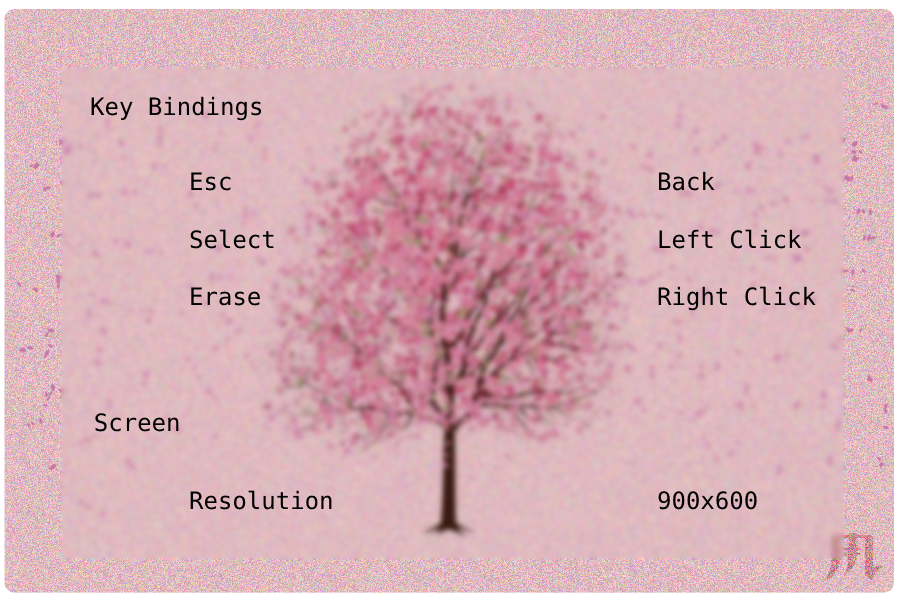
<style>
.page{position:relative;width:900px;height:600px}
.page>*{position:absolute;margin:0}
.t1{font:24px "DejaVuSansMono";color:#000000}
</style>
<div class="page">
<p class="t1" style="left:91px;top:96px;width:171px;height:25px">Key Bindings</p>
<p class="t1" style="left:190px;top:171px;width:626px;height:140px">Esc            Back<br><br>Select           Left Click<br><br>Erase           Right Click</p>
<p class="t1" style="left:95px;top:413px;width:84px;height:19px">Screen</p>
<p class="t1" style="left:190px;top:490px;width:567px;height:20px">Resolution         900x600</p>
</div>
